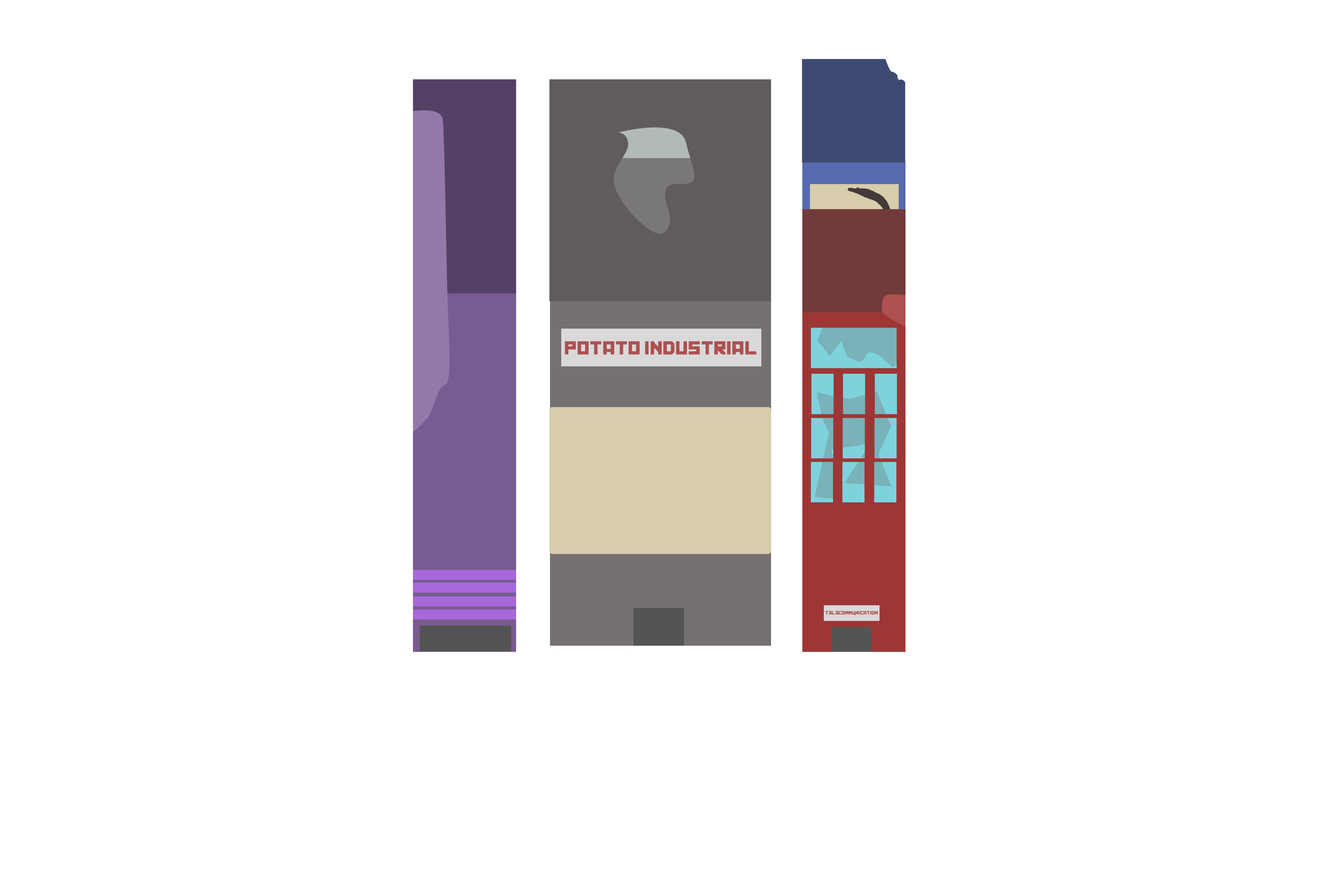
<style>
.page{position:relative;width:1337px;height:892px;background:#ffffff}
.page>*{position:absolute;margin:0}
.t1{font:17.7px "Kremlin";color:#ae5050;font-weight:bold}
.t2{font:14.2px "Kremlin";color:#ae5050;font-weight:bold}
.t3{font:4.6px "Kremlin";color:#ae5050;font-weight:bold}
.t4{font:3.1px "Kremlin";color:#90d4d6;font-weight:bold}
</style>
<div class="page">
<p class="t1" style="left:565px;top:341px;width:192px;height:13px"><span class="t2"><br></span><br>POTATO INDUSTRIAL</p>
<p class="t3" style="left:825px;top:611px;width:53px;height:4px"><span class="t4"><br></span>telecommunication</p>
</div>
